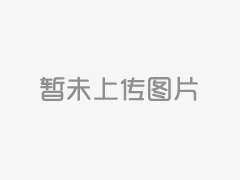
<style>
.page{position:relative;width:240px;height:180px;background:#f6f6f6}
.page>*{position:absolute;margin:0}
.t1{font:26px "MFYueYuan_Noncommercial-Regular";color:#8f8f8f;font-weight:bold}
</style>
<div class="page">
<p class="t1" style="left:40px;top:76px;width:158px;height:25px">暂未上传图片</p>
</div>
